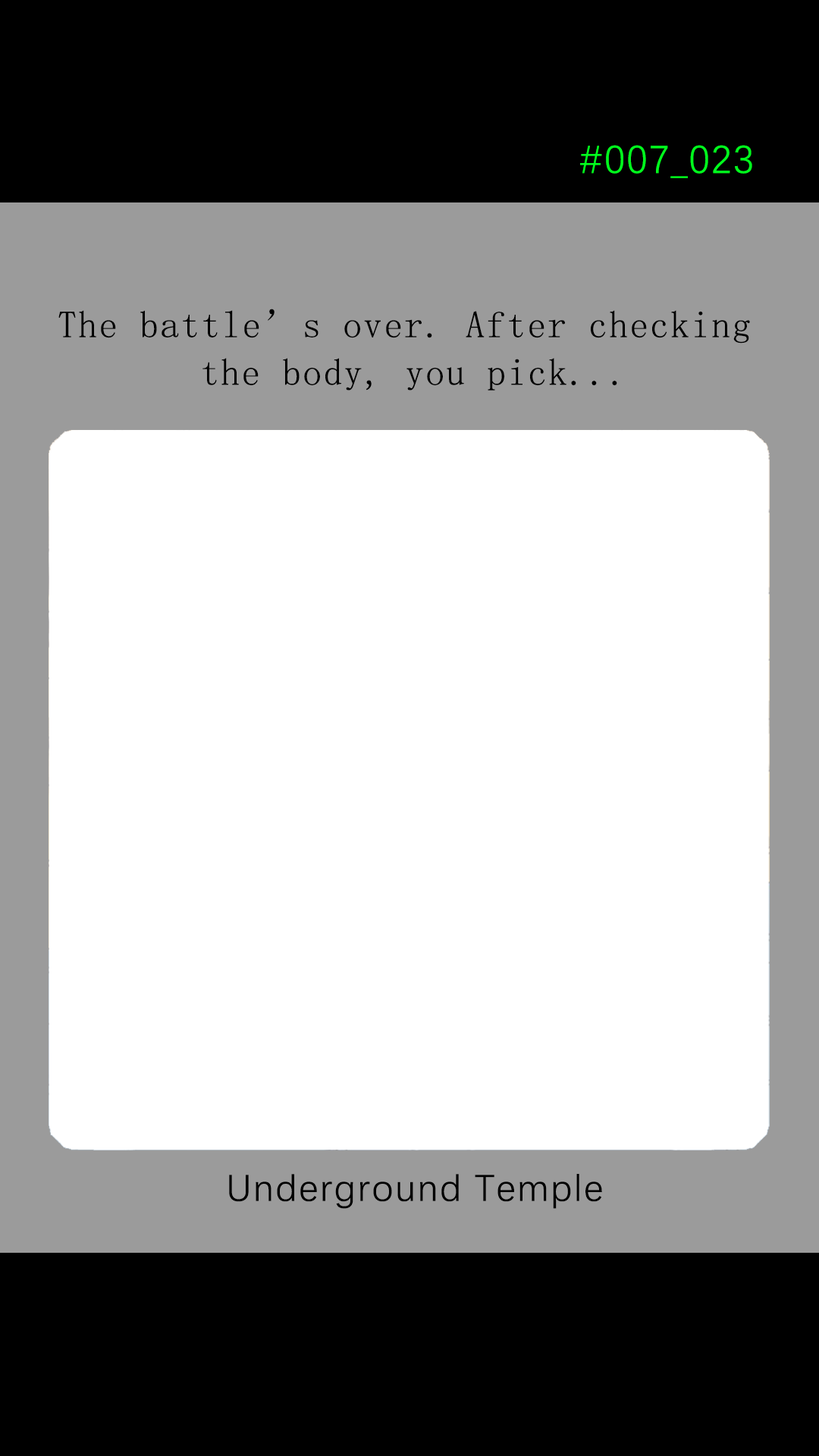
<style>
.page{position:relative;width:819px;height:1456px;background:#ffffff}
.page>*{position:absolute;margin:0}
.t1{font:39.2px "DengXian-Regular";letter-spacing:0.04em;color:#00ff1e}
.t2{font:37.9px/47.6px "SimSun";letter-spacing:0.04em;color:#000000}
.t3{font:37.9px "DengXian-Regular";letter-spacing:0.04em;color:#000000}
</style>
<div class="page">
<p class="t1" style="left:580px;top:145px;width:172px;height:33px">#007_023</p>
<p class="t2" style="left:58px;top:309px;width:692px;height:82px;text-align:center">The battle’s over. After checking <br>the body, you pick...</p>
<p class="t3" style="left:229px;top:1174px;width:373px;height:35px">Underground Temple</p>
</div>
